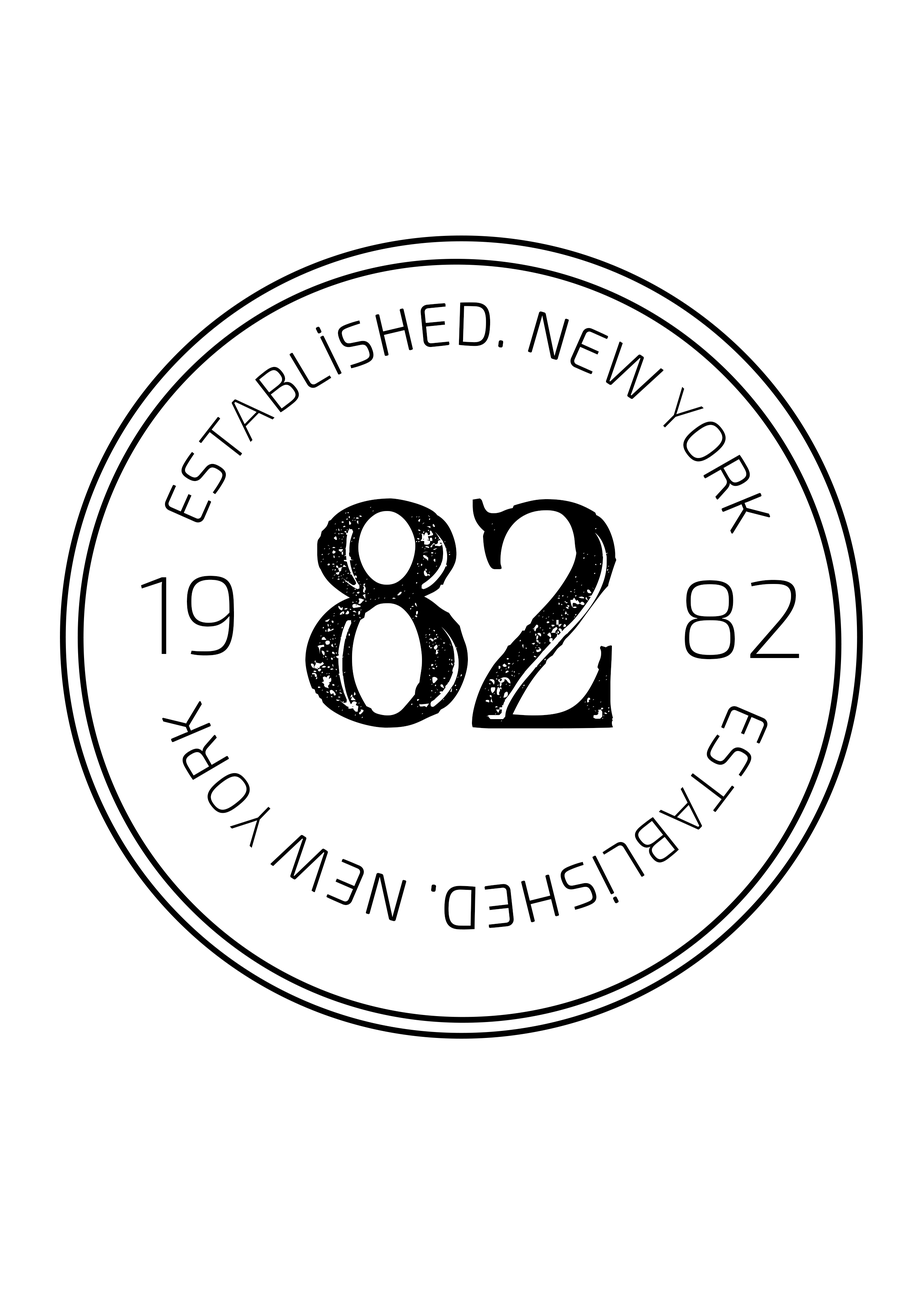
<style>
.page{position:relative;width:918px;height:1299px;background:#ffffff}
.page>*{position:absolute;margin:0}
.t1{font:59.2px "Exo2-ExtraLight";color:#000000;font-weight:bold}
.t2{font:370.2px "Buffalo-Inline-2-Grunge";color:#000000}
.t3{font:111.1px "Exo2-ExtraLight";color:#000000}
</style>
<div class="page">
<p class="t1" style="left:165px;top:302px;width:605px;height:231px">ESTABLİSHED. NEW YORK</p>
<p class="t2" style="left:305px;top:498px;width:311px;height:230px">82</p>
<p class="t3" style="left:141px;top:576px;width:93px;height:79px">19</p>
<p class="t3" style="left:685px;top:580px;width:114px;height:79px">82</p>
<p class="t1" style="left:162px;top:701px;width:606px;height:228px">ESTABLİSHED. NEW YORK</p>
</div>
